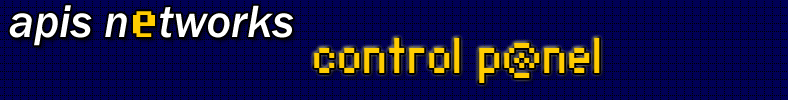
<style>
.page{position:relative;width:788px;height:100px;background:#000055}
.page>*{position:absolute;margin:0}
.t1{font:47px "FranklinGothic-MediumItalic";color:#ffffff}
.t2{font:47px "Fixedsys";color:#ffcc00}
.t3{font:40px "Standard0753";color:#ffcc00}
</style>
<div class="page">
<p class="t1" style="left:9px;top:5px;width:285px;height:41px">apis n<span class="t2">e</span>tworks</p>
<p class="t3" style="left:314px;top:38px;width:286px;height:45px">control p@nel</p>
</div>
